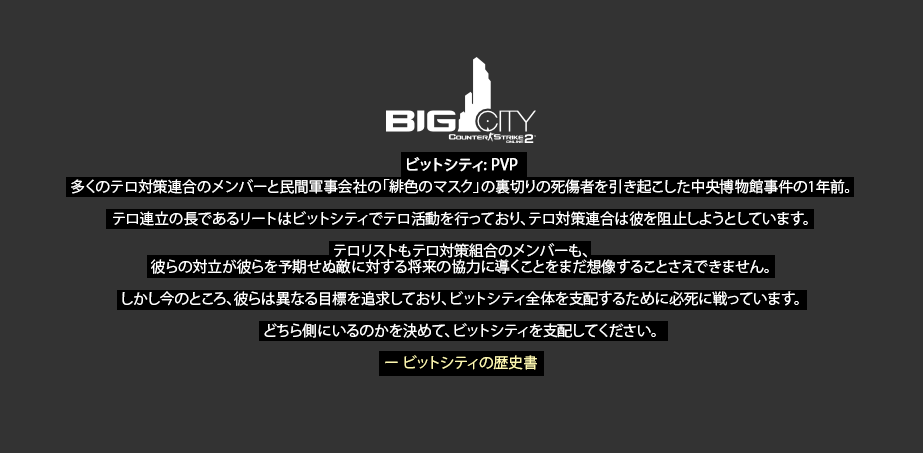
<style>
.page{position:relative;width:923px;height:453px;background:#333333}
.page>*{position:absolute;margin:0}
.t1{font:14.6px/16px "KozGoPr6N-Regular";color:#ffffff}
.t2{font:14.6px/6px "KozGoPr6N-Regular";color:#ffffff;font-weight:bold}
.t3{font:14.6px/16px "KozGoPr6N-Regular";color:#fdf7b0}
</style>
<div class="page">
<p class="t1" style="left:71px;top:157px;width:779px;height:213px;text-align:center"><span class="t2">ビットシティ: PVP<br><br></span>多くのテロ対策連合のメンバーと民間軍事会社の「緋色のマスク」の裏切りの死傷者を引き起こした中央博物館事件の1年前。<br><br>テロ連立の長であるリートはビットシティでテロ活動を行っており、テロ対策連合は彼を阻止しようとしています。<br><br>テロリストもテロ対策組合のメンバーも、<br>彼らの対立が彼らを予期せぬ敵に対する将来の協力に導くことをまだ想像することさえできません。<br><br>しかし今のところ、彼らは異なる目標を追求しており、ビットシティ全体を支配するために必死に戦っています。<br><br>どちら側にいるのかを決めて、ビットシティを支配してください。<br><br><span class="t3">ー ビットシティの歴史書</span></p>
</div>
